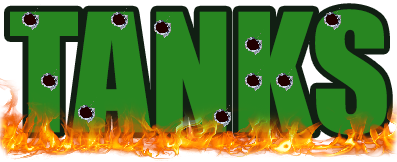
<style>
.page{position:relative;width:397px;height:162px;background:#288621}
.page>*{position:absolute;margin:0}
.t1{font:152px "Impact";color:#288621}
</style>
<div class="page">
<p class="t1" style="left:10px;top:9px;width:377px;height:126px">TANKS</p>
</div>
